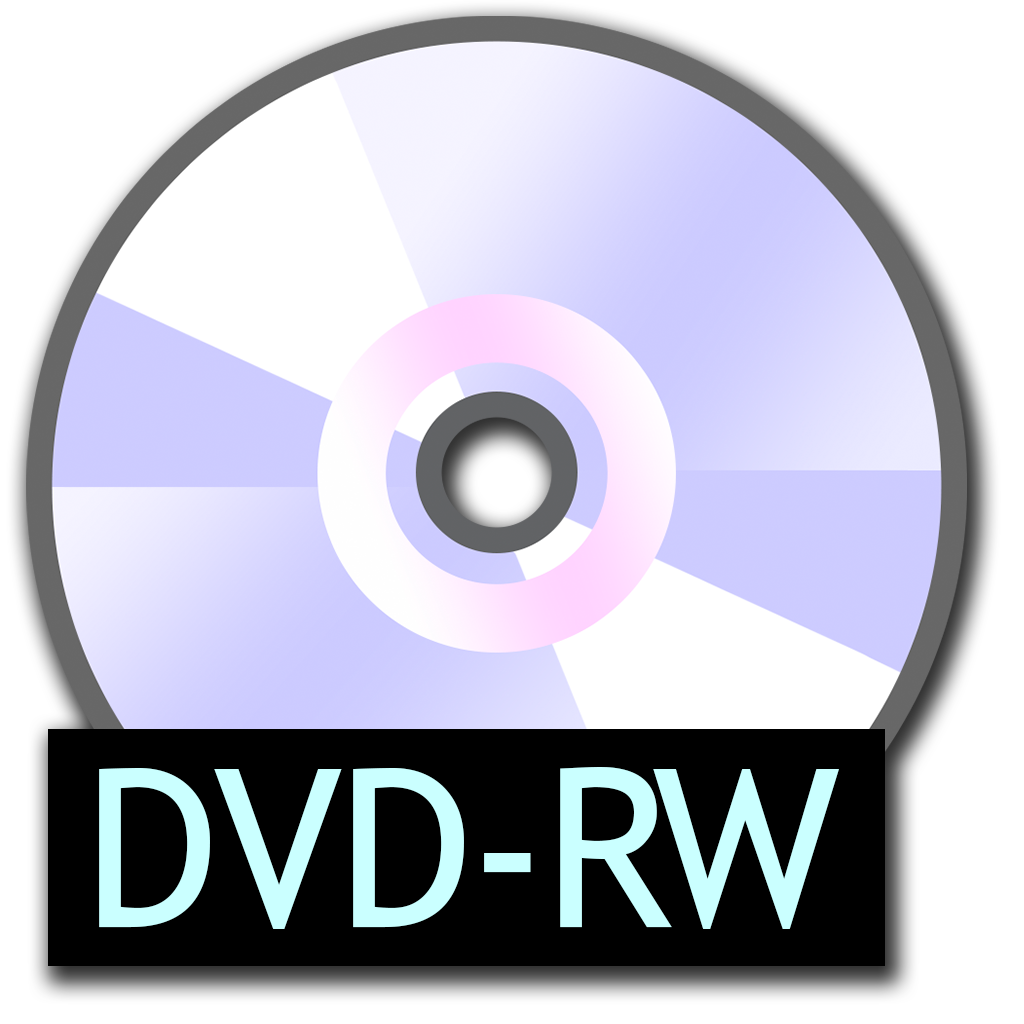
<style>
.page{position:relative;width:1024px;height:1024px;background:#ffffff}
.page>*{position:absolute;margin:0}
.t1{font:220.9px "TrebuchetMS";letter-spacing:-0.025em;color:#caffff}
</style>
<div class="page">
<p class="t1" style="left:99px;top:767px;width:740px;height:162px">DVD-RW</p>
</div>
